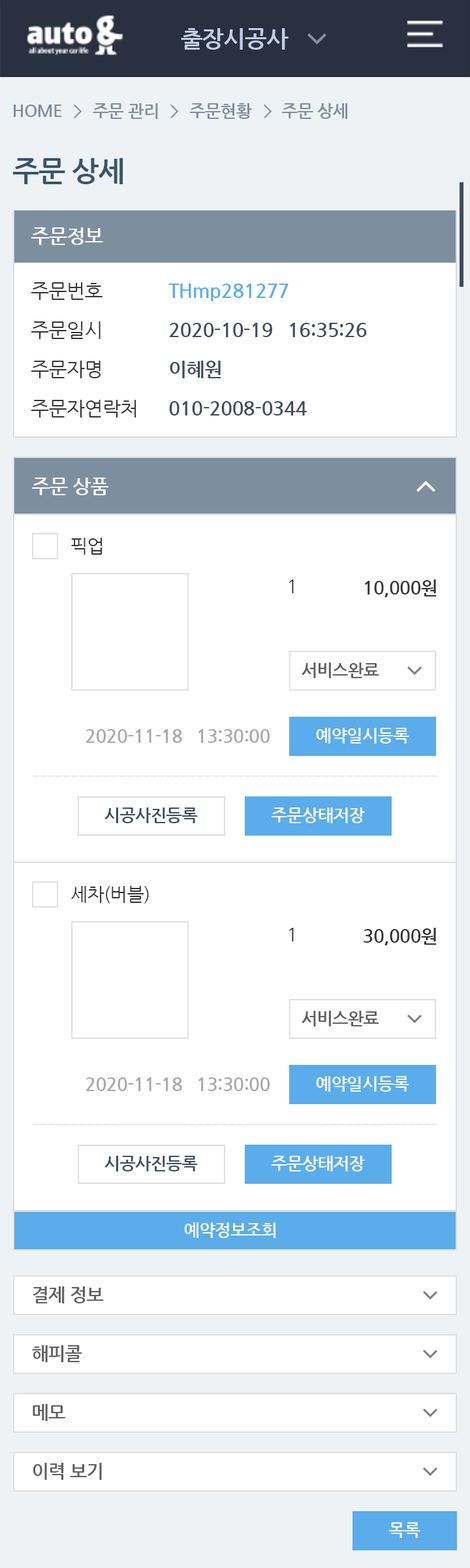
<style>
.page{position:relative;width:470px;height:1568px;background:#ffffff}
.page>*{position:absolute;margin:0}
.t1{font:23.5px "NanumGothicBold";letter-spacing:-0.025em;color:#c2cee7}
.t2{font:17px "NanumGothicBold";letter-spacing:-0.025em;color:#7d8e9e}
.t3{font:28.7px "NanumGothicBold";letter-spacing:-0.025em;color:#39546c}
.t4{font:19.6px "NanumGothicBold";letter-spacing:-0.025em;color:#ffffff}
.t5{font:19.6px/39.2px "NanumGothic";letter-spacing:-0.025em;color:#333333}
.t6{font:19.6px/39.2px "NanumGothicBold";letter-spacing:-0.025em;color:#3f4b61}
.t7{font:19.6px/39.2px "NanumGothicBold";letter-spacing:-0.025em;color:#5aacea}
.t8{font:18.3px "NanumGothic";letter-spacing:-0.025em;color:#333333}
.t9{font:18.3px "NanumGothicBold";letter-spacing:-0.025em;color:#333333}
.t10{font:17px "NanumGothicBold";letter-spacing:-0.025em;color:#5f5f5f}
.t11{font:18.3px "NanumGothicBold";letter-spacing:-0.025em;color:#a6a7ac}
.t12{font:17px "NanumGothicBold";letter-spacing:-0.025em;color:#ffffff}
.t13{font:17px "NanumGothicBold";letter-spacing:-0.025em;color:#3f4b61}
.t14{font:18.3px "NanumGothicBold";letter-spacing:-0.025em;color:#5f5f5f}
</style>
<div class="page">
<p class="t1" style="left:181px;top:28px;width:108px;height:22px">출장시공사</p>
<p class="t2" style="left:14px;top:103px;width:334px;height:16px">HOME       주문 관리       주문현황       주문 상세</p>
<p class="t3" style="left:12px;top:158px;width:111px;height:26px">주문 상세</p>
<p class="t4" style="left:31px;top:227px;width:72px;height:18px">주문정보</p>
<p class="t5" style="left:31px;top:282px;width:106px;height:135px">주문번호<br>주문일시<br>주문자명<br>주문자연락처</p>
<p class="t6" style="left:169px;top:284px;width:198px;height:132px"><span class="t7">THmp281277<br></span>2020-10-19   16:35:26<br>이혜원<br>010-2008-0344</p>
<p class="t4" style="left:32px;top:478px;width:77px;height:17px">주문 상품</p>
<p class="t8" style="left:71px;top:538px;width:32px;height:17px">픽업</p>
<p class="t8" style="left:289px;top:580px;width:5px;height:13px">1</p>
<p class="t9" style="left:365px;top:580px;width:72px;height:17px">10,000원</p>
<p class="t10" style="left:302px;top:662px;width:78px;height:16px">서비스완료</p>
<p class="t11" style="left:86px;top:729px;width:184px;height:14px">2020-11-18   13:30:00</p>
<p class="t12" style="left:316px;top:728px;width:94px;height:15px">예약일시등록</p>
<p class="t13" style="left:105px;top:808px;width:93px;height:15px">시공사진등록</p>
<p class="t12" style="left:272px;top:808px;width:93px;height:15px">주문상태저장</p>
<p class="t8" style="left:71px;top:886px;width:78px;height:18px">세차(버블)</p>
<p class="t8" style="left:289px;top:928px;width:5px;height:13px">1</p>
<p class="t9" style="left:364px;top:928px;width:73px;height:17px">30,000원</p>
<p class="t10" style="left:302px;top:1011px;width:78px;height:15px">서비스완료</p>
<p class="t11" style="left:86px;top:1077px;width:184px;height:14px">2020-11-18   13:30:00</p>
<p class="t12" style="left:316px;top:1076px;width:94px;height:16px">예약일시등록</p>
<p class="t13" style="left:105px;top:1156px;width:93px;height:15px">시공사진등록</p>
<p class="t12" style="left:272px;top:1156px;width:93px;height:15px">주문상태저장</p>
<p class="t12" style="left:184px;top:1222px;width:92px;height:16px">예약정보조회</p>
<p class="t14" style="left:33px;top:1286px;width:71px;height:17px">결제 정보</p>
<p class="t14" style="left:32px;top:1345px;width:50px;height:17px">해피콜</p>
<p class="t14" style="left:33px;top:1404px;width:32px;height:17px">메모</p>
<p class="t14" style="left:33px;top:1463px;width:69px;height:17px">이력 보기</p>
<p class="t12" style="left:389px;top:1522px;width:32px;height:16px">목록</p>
</div>
